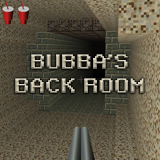
<style>
.page{position:relative;width:160px;height:160px}
.page>*{position:absolute;margin:0}
.t1{font:20px "RetroGaming"}
</style>
<div class="page">
<p class="t1" style="left:15px;top:54px;width:129px;height:39px;text-align:center">BUBBA’S<br>BACK ROOM</p>
</div>
